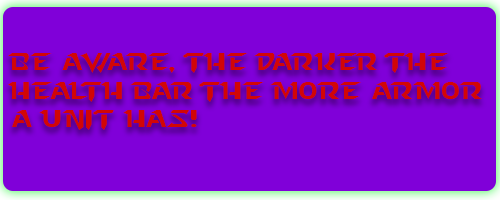
<style>
.page{position:relative;width:500px;height:200px;background:#8000d9}
.page>*{position:absolute;margin:0}
.t1{font:24px "StarcraftNormal";color:#d20606}
</style>
<div class="page">
<p class="t1" style="left:8px;top:53px;width:474px;height:77px">Be Aware, the darker the health bar the more armor a unit has!</p>
</div>
